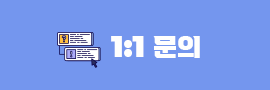
<style>
.page{position:relative;width:270px;height:90px;background:#7496ee}
.page>*{position:absolute;margin:0}
.t1{font:30px "Montserrat-Black";color:#fffffe}
.t2{font:24px "VITRO-CORE-TTF";color:#fffffe}
</style>
<div class="page">
<p class="t1" style="left:111px;top:36px;width:33px;height:21px">1:1</p>
<p class="t2" style="left:153px;top:36px;width:47px;height:22px">문의</p>
</div>
